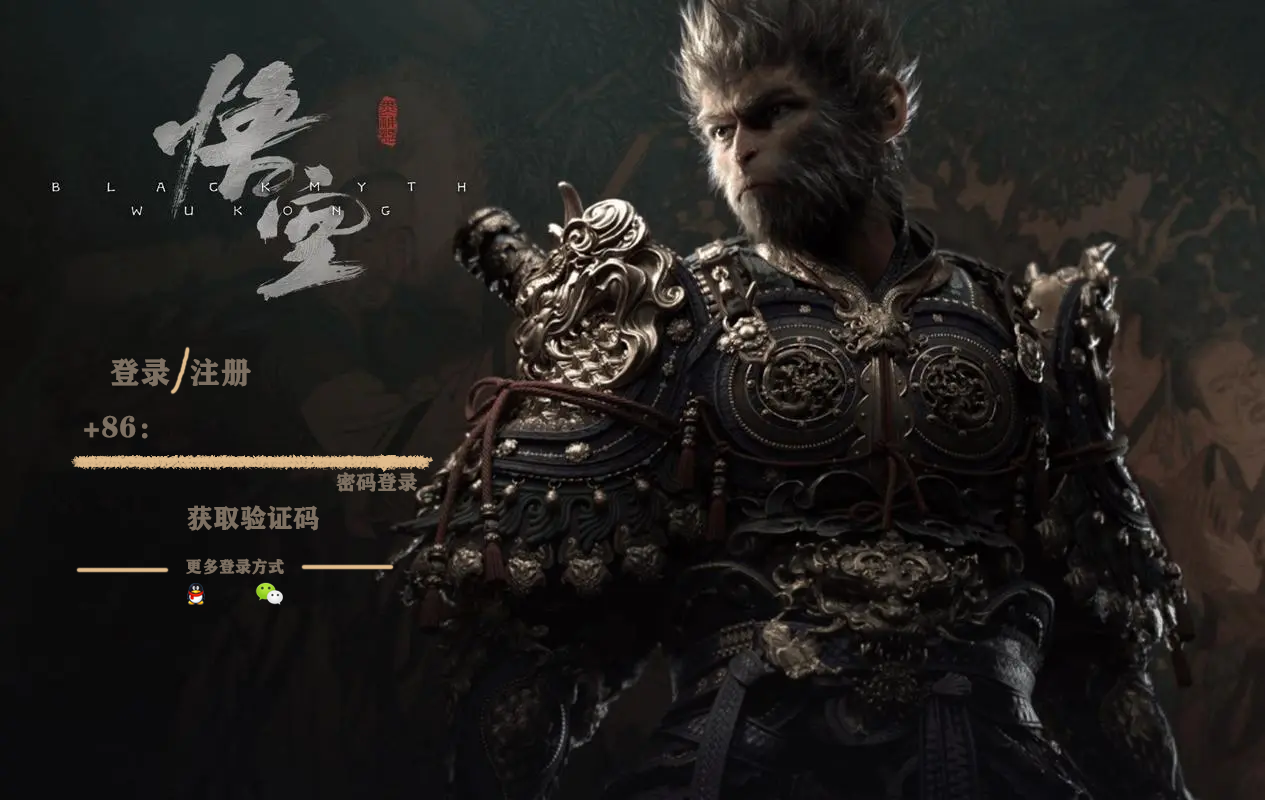
<style>
.page{position:relative;width:1265px;height:800px}
.page>*{position:absolute;margin:0}
.t1{font:30px "FZCHSJW--GB1-0";color:#7d7062;font-weight:bold}
.t2{font:20px "FZCHSJW--GB1-0";color:#7d7062;font-weight:bold}
.t3{font:26px "FZCHSJW--GB1-0";color:#7d7062;font-weight:bold}
.t4{font:16px "FZCHSJW--GB1-0";color:#7d7062;font-weight:bold}
</style>
<div class="page">
<p class="t1" style="left:110px;top:358px;width:141px;height:29px">登录  注册</p>
<p class="t1" style="left:84px;top:415px;width:64px;height:24px">+86：</p>
<p class="t2" style="left:336px;top:472px;width:81px;height:20px">密码登录</p>
<p class="t3" style="left:187px;top:505px;width:132px;height:26px">获取验证码</p>
<p class="t4" style="left:186px;top:558px;width:98px;height:17px">更多登录方式</p>
</div>
